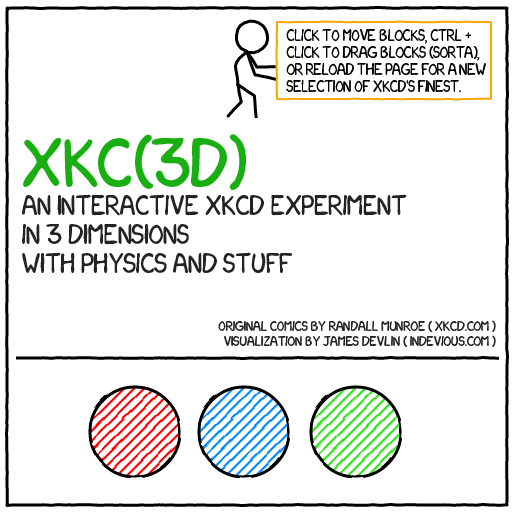
<style>
.page{position:relative;width:512px;height:512px;background:#ffffff}
.page>*{position:absolute;margin:0}
.t1{font:14px "xkcd-Regular";letter-spacing:-0.025em;color:#000000;text-transform:uppercase}
.t2{font:24px "xkcd-Regular";color:#232323;text-transform:uppercase}
.t3{font:60px "xkcd-Regular";color:#19ae12;text-transform:uppercase}
.t4{font:12px "xkcd-Regular";color:#232323;text-transform:uppercase}
</style>
<div class="page">
<p class="t1" style="left:286px;top:29px;width:200px;height:63px">CLICK TO MOVE BLOCKS, CTRL + CLICK TO DRAG BLOCKS (SORTA), OR RELOAD THE PAGE FOR A NEW SELECTION OF XKCD'S FINEST.</p>
<p class="t2" style="left:22px;top:134px;width:385px;height:139px"><span class="t3">xkC(3d)<br></span>An interactive xkcd Experiment<br>In 3 Dimensions<br>With PHYSICS AND STUFF</p>
<p class="t4" style="left:218px;top:320px;width:278px;height:27px;text-align:right">Original comics by randall munroe ( xkcd.com )<br>Visualization by James Devlin ( indevious.com )</p>
</div>
